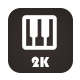
<style>
.page{position:relative;width:80px;height:80px;background:#ffffff}
.page>*{position:absolute;margin:0}
.t1{font:15px "Bauhaus93";color:#ffffff}
</style>
<div class="page">
<p class="t1" style="left:31px;top:56px;width:18px;height:11px">2K</p>
</div>
